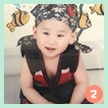
<style>
.page{position:relative;width:108px;height:108px}
.page>*{position:absolute;margin:0}
.t1{font:12px "DFPiPi-W5-WINP-BF";letter-spacing:0.1em;color:#ffffff;font-weight:bold}
</style>
<div class="page">
<p class="t1" style="left:90px;top:89px;width:7px;height:10px">2</p>
</div>
